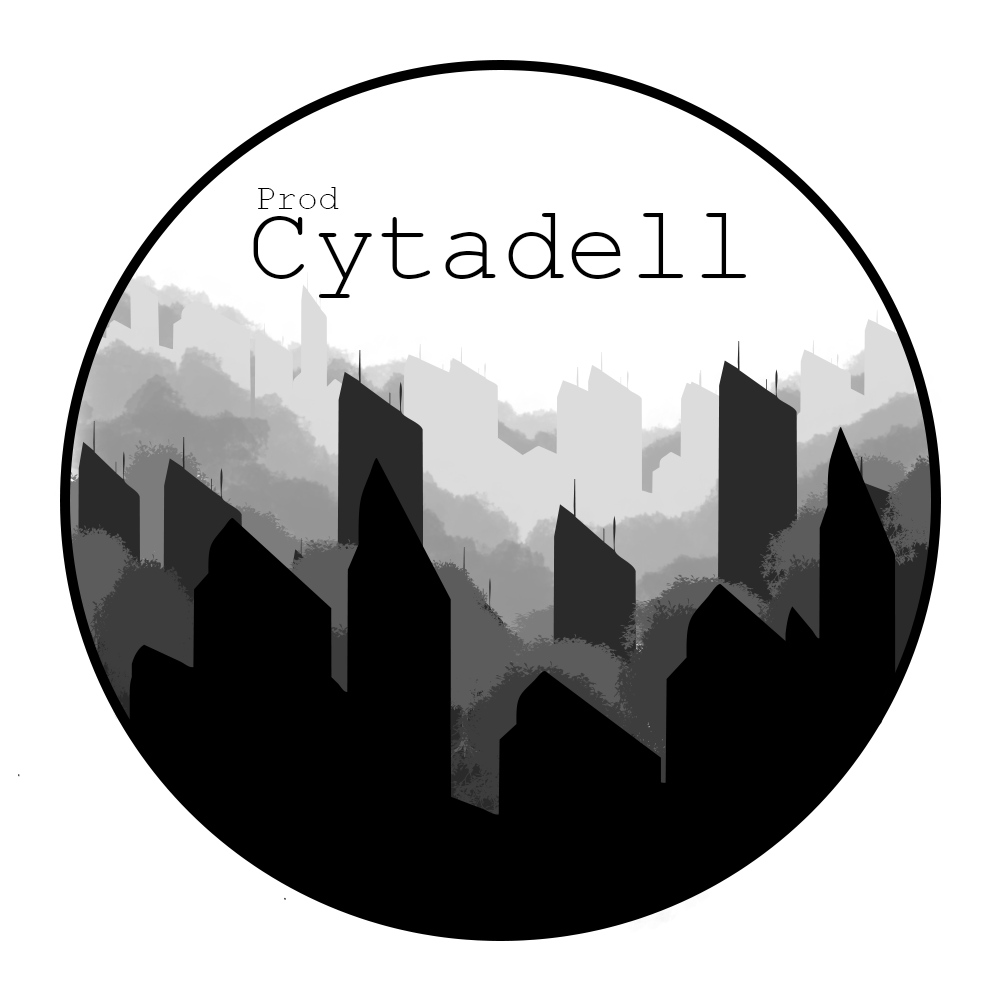
<style>
.page{position:relative;width:1000px;height:1000px;background:#ffffff}
.page>*{position:absolute;margin:0}
.t1{font:35.3px "CourierNewPSMT";color:#000000}
.t2{font:105.8px "CourierNewPSMT";color:#000000}
</style>
<div class="page">
<p class="t1" style="left:258px;top:187px;width:81px;height:22px">Prod</p>
<p class="t2" style="left:253px;top:213px;width:494px;height:85px">Cytadell</p>
</div>
